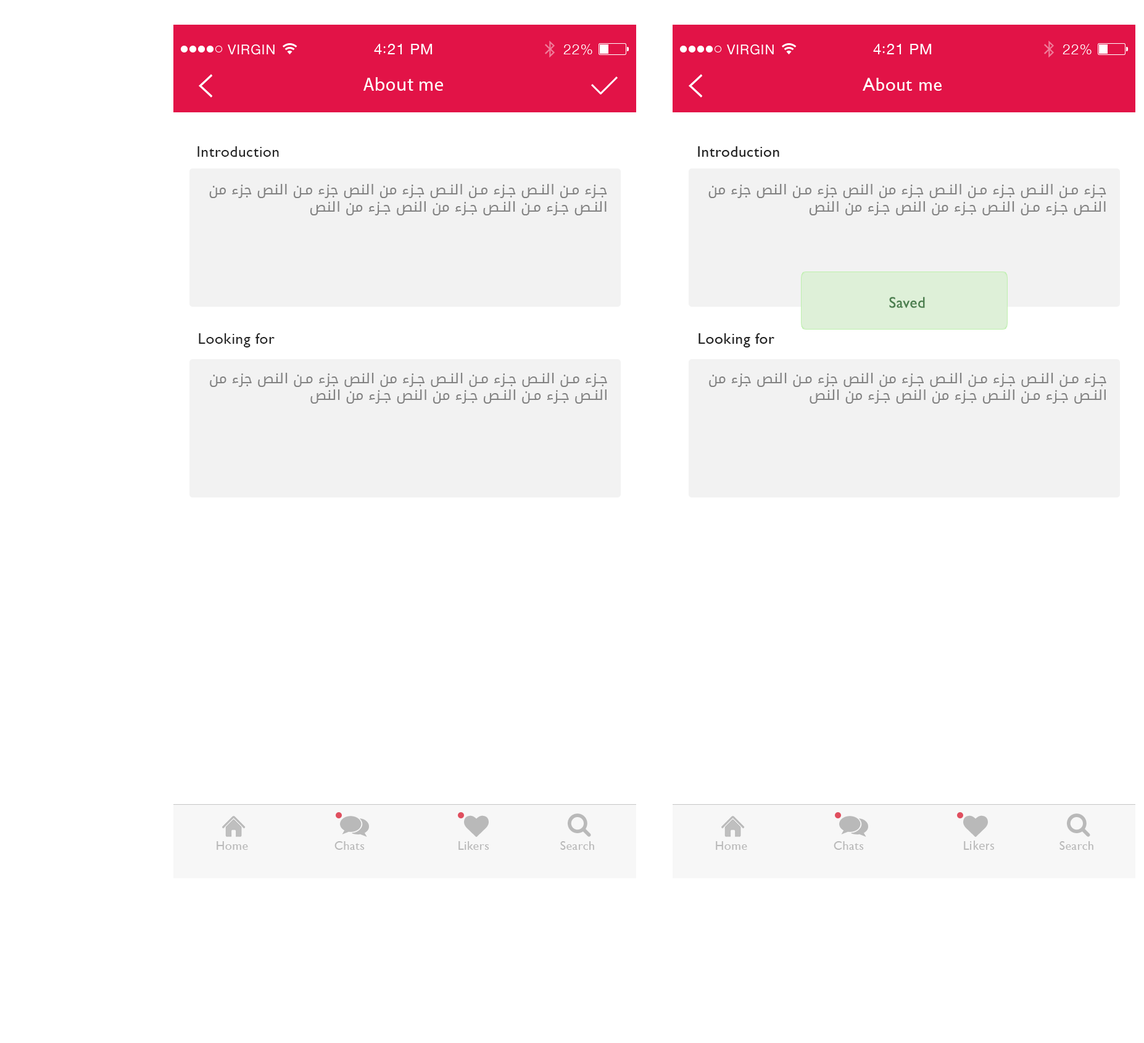
<style>
.page{position:relative;width:1144px;height:1043px;background:#ffffff}
.page>*{position:absolute;margin:0}
.t1{font:18.5px "GillSans";letter-spacing:0.029em;color:#ffffff}
.t2{font:15.4px "GillSans";letter-spacing:0.029em;color:#262626}
.t3{font:14.2px "DroidArabicKufi";letter-spacing:0.029em;color:#828282}
.t4{font:15.4px "GillSans";letter-spacing:0.029em;color:#4c7f4f}
.t5{font:12.3px "GillSans";letter-spacing:0.029em;color:#b9b9b9}
.t6{font:12.3px "MyriadPro-Regular";letter-spacing:0.029em;color:#b9b9b9}
</style>
<div class="page">
<p class="t1" style="left:363px;top:77px;width:80px;height:14px">About me</p>
<p class="t1" style="left:862px;top:78px;width:79px;height:13px">About me</p>
<p class="t2" style="left:197px;top:146px;width:82px;height:11px">Introduction</p>
<p class="t2" style="left:698px;top:146px;width:81px;height:11px">Introduction</p>
<p class="t3" style="left:209px;top:184px;width:398px;height:31px;text-align:right">جزء من النص جزء من النص جزء من النص جزء من النص جزء من<br> النص جزء من النص جزء من النص جزء من النص</p>
<p class="t3" style="left:708px;top:184px;width:398px;height:31px;text-align:right">جزء من النص جزء من النص جزء من النص جزء من النص جزء من<br> النص جزء من النص جزء من النص جزء من النص</p>
<p class="t4" style="left:889px;top:297px;width:36px;height:11px">Saved</p>
<p class="t2" style="left:199px;top:333px;width:76px;height:14px">Looking for</p>
<p class="t2" style="left:698px;top:333px;width:76px;height:14px">Looking for</p>
<p class="t3" style="left:210px;top:373px;width:397px;height:30px;text-align:right">جزء من النص جزء من النص جزء من النص جزء من النص جزء من<br> النص جزء من النص جزء من النص جزء من النص</p>
<p class="t3" style="left:709px;top:373px;width:397px;height:30px;text-align:right">جزء من النص جزء من النص جزء من النص جزء من النص جزء من<br> النص جزء من النص جزء من النص جزء من النص</p>
<p class="t5" style="left:217px;top:841px;width:31px;height:8px">Home</p>
<p class="t5" style="left:334px;top:841px;width:31px;height:8px">Chats</p>
<p class="t5" style="left:458px;top:841px;width:31px;height:8px">Likers</p>
<p class="t5" style="left:560px;top:841px;width:34px;height:8px">Search</p>
<p class="t5" style="left:716px;top:841px;width:31px;height:8px">Home</p>
<p class="t5" style="left:833px;top:841px;width:31px;height:8px">Chats</p>
<p class="t6" style="left:964px;top:840px;width:30px;height:9px"><span class="t5">L</span>ikers</p>
<p class="t5" style="left:1059px;top:841px;width:34px;height:8px">Search</p>
</div>
